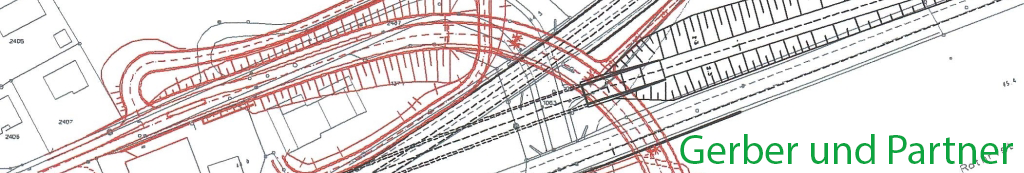
<style>
.page{position:relative;width:1024px;height:173px;background:#ffffff}
.page>*{position:absolute;margin:0}
.t1{font:41.7px "MyriadPro-Regular";color:#0da43f}
</style>
<div class="page">
<p class="t1" style="left:680px;top:134px;width:333px;height:30px">Gerber und Partner</p>
</div>
